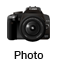
<style>
.page{position:relative;width:58px;height:64px;background:#ffffff}
.page>*{position:absolute;margin:0}
.t1{font:11px "Roboto-Regular";color:#111111}
</style>
<div class="page">
<p class="t1" style="left:14px;top:51px;width:30px;height:8px">Photo</p>
</div>
